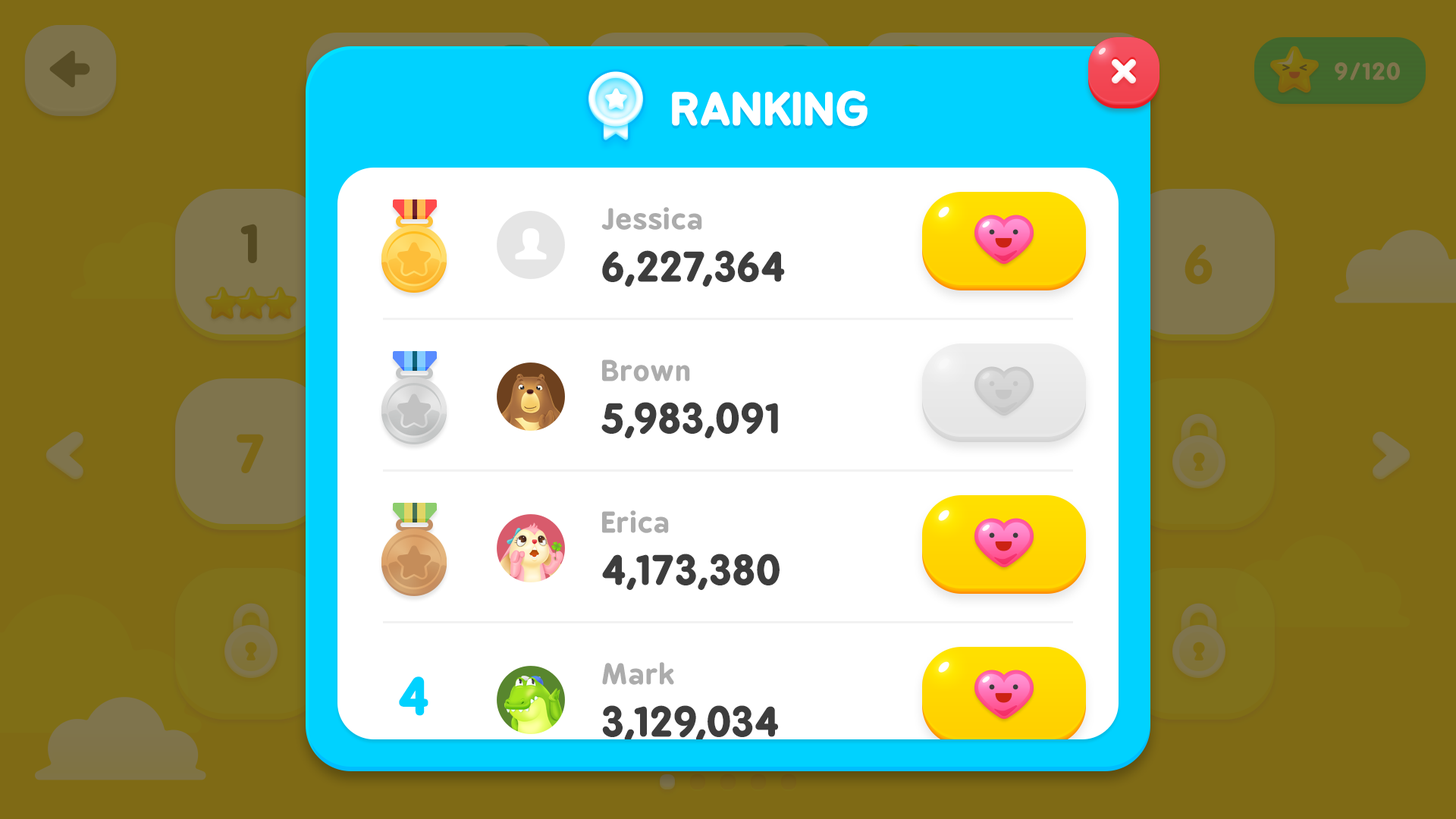
<style>
.page{position:relative;width:1456px;height:819px;background:#7f6a15}
.page>*{position:absolute;margin:0}
.t1{font:43.1px "BPreplay-Bold";color:#ffffff;scale:1.05 1}
.t2{font:27.4px "BPreplay-Bold";color:#acacac;scale:1.05 1}
.t3{font:40.3px "BPreplay-Bold";color:#3d3d3d;scale:1.05 1}
.t4{font:51.9px "BPreplay-Bold";color:#00d2ff;scale:1.05 1}
</style>
<div class="page">
<p class="t1" style="left:672px;top:90px;width:196px;height:37px">RANKING</p>
<p class="t2" style="left:601px;top:207px;width:101px;height:23px">Jessica</p>
<p class="t3" style="left:602px;top:250px;width:183px;height:37px">6,227,364</p>
<p class="t2" style="left:602px;top:359px;width:88px;height:22px">Brown</p>
<p class="t3" style="left:601px;top:402px;width:177px;height:36px">5,983,091</p>
<p class="t2" style="left:602px;top:510px;width:67px;height:23px">Erica</p>
<p class="t3" style="left:602px;top:554px;width:178px;height:36px">4,173,380</p>
<p class="t2" style="left:602px;top:662px;width:72px;height:23px">Mark</p>
<p class="t4" style="left:399px;top:676px;width:29px;height:40px">4</p>
<p class="t3" style="left:602px;top:705px;width:176px;height:37px">3,129,034</p>
</div>
